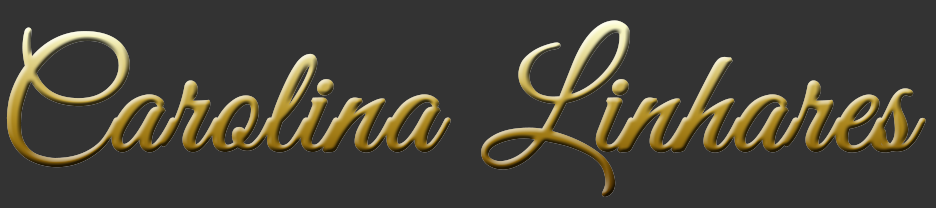
<style>
.page{position:relative;width:936px;height:208px;background:#333333}
.page>*{position:absolute;margin:0}
.t1{font:150px "GreatVibes-Regular";font-weight:bold}
</style>
<div class="page">
<p class="t1" style="left:6px;top:20px;width:920px;height:177px">Carolina Linhares</p>
</div>
